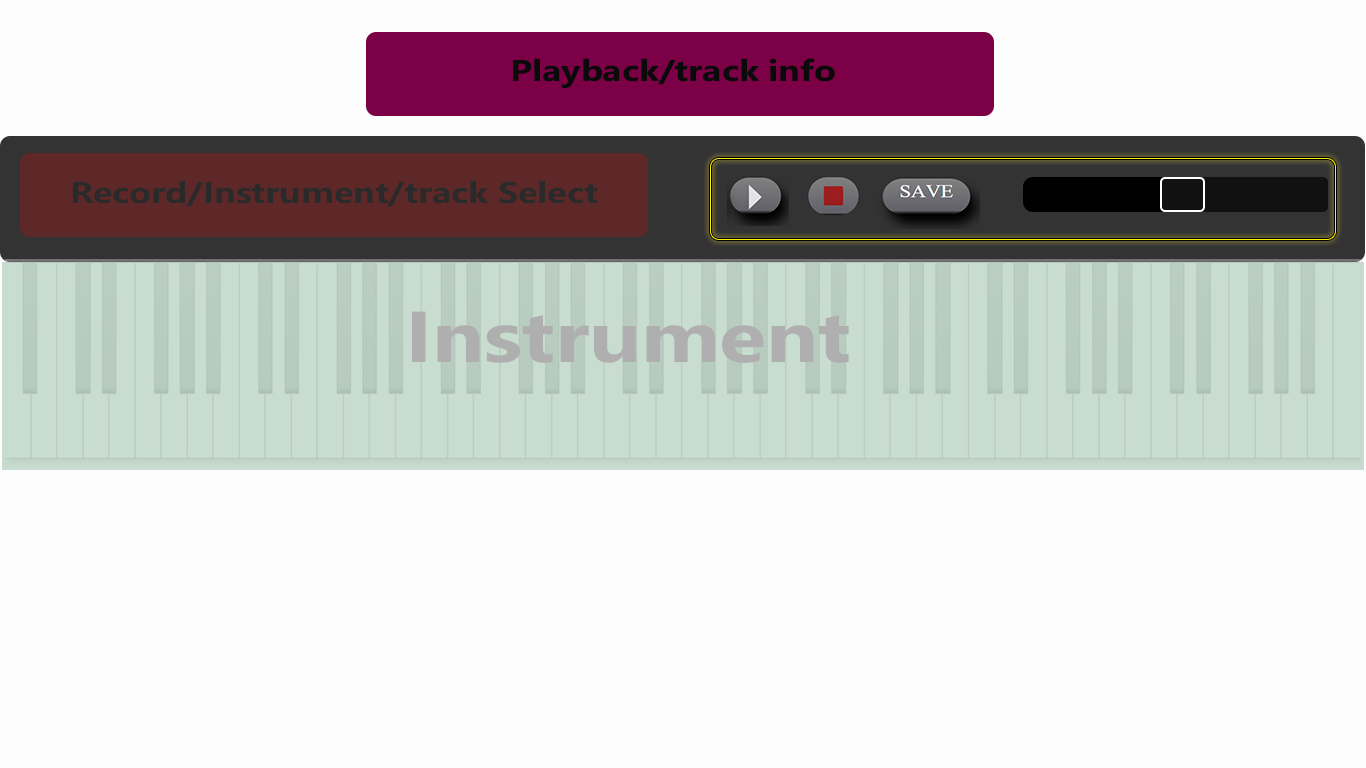
<style>
.page{position:relative;width:1366px;height:768px;background:#fdfdfd}
.page>*{position:absolute;margin:0}
.t1{font:30px "SegoeWP-Bold";letter-spacing:-0.005em;color:#0a0a0a;scale:1.2 1}
.t2{font:30px "SegoeWP-Bold";letter-spacing:-0.005em;color:#2a2a2a;scale:1.2 1}
.t3{font:72px "SegoeWP-Bold";letter-spacing:-0.005em;color:#afafaf;scale:1.2 1}
</style>
<div class="page">
<p class="t1" style="left:513px;top:58px;width:322px;height:30px">Playback/track info</p>
<p class="t2" style="left:73px;top:180px;width:525px;height:27px">Record/Instrument/track Select</p>
<p class="t3" style="left:412px;top:311px;width:437px;height:52px">Instrument</p>
</div>
